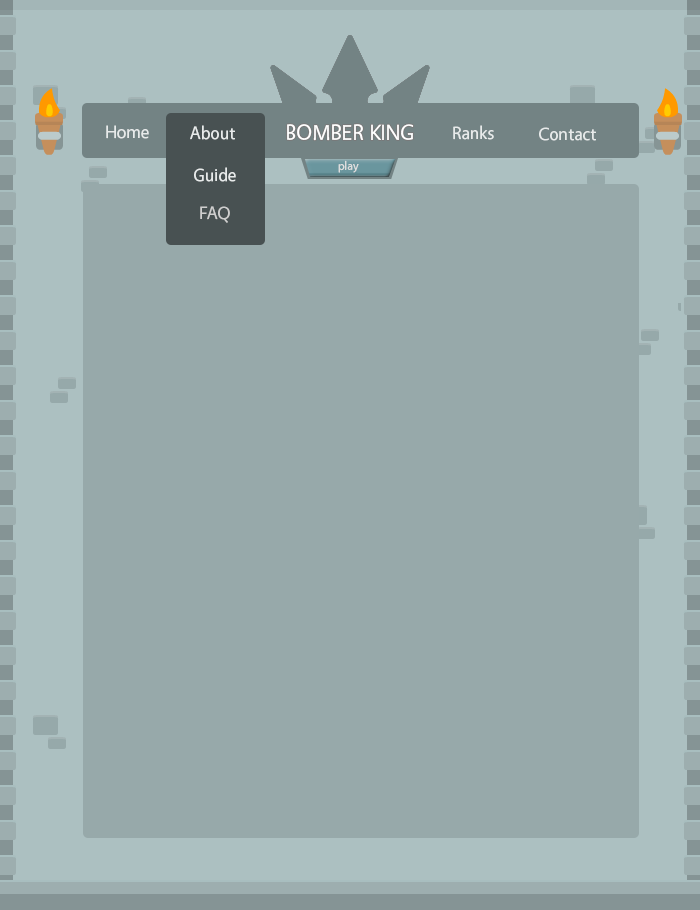
<style>
.page{position:relative;width:700px;height:910px;background:#97a9aa}
.page>*{position:absolute;margin:0}
.t1{font:18px "Vegur-Regular";color:#e7eaea}
.t2{font:22px "Vegur-Regular";color:#ffffff}
.t3{font:12px "Vegur-Regular";color:#dddddd}
.t4{font:18px "Vegur-Regular";color:#cfcfcf}
</style>
<div class="page">
<p class="t1" style="left:106px;top:125px;width:43px;height:14px">Home</p>
<p class="t1" style="left:190px;top:125px;width:45px;height:15px">About</p>
<p class="t2" style="left:287px;top:124px;width:127px;height:17px">BOMBER KING</p>
<p class="t1" style="left:453px;top:125px;width:41px;height:15px">Ranks</p>
<p class="t1" style="left:539px;top:127px;width:57px;height:14px">Contact</p>
<p class="t3" style="left:338px;top:160px;width:21px;height:13px">play</p>
<p class="t1" style="left:194px;top:167px;width:42px;height:15px">Guide</p>
<p class="t4" style="left:200px;top:206px;width:30px;height:17px">FAQ</p>
</div>
